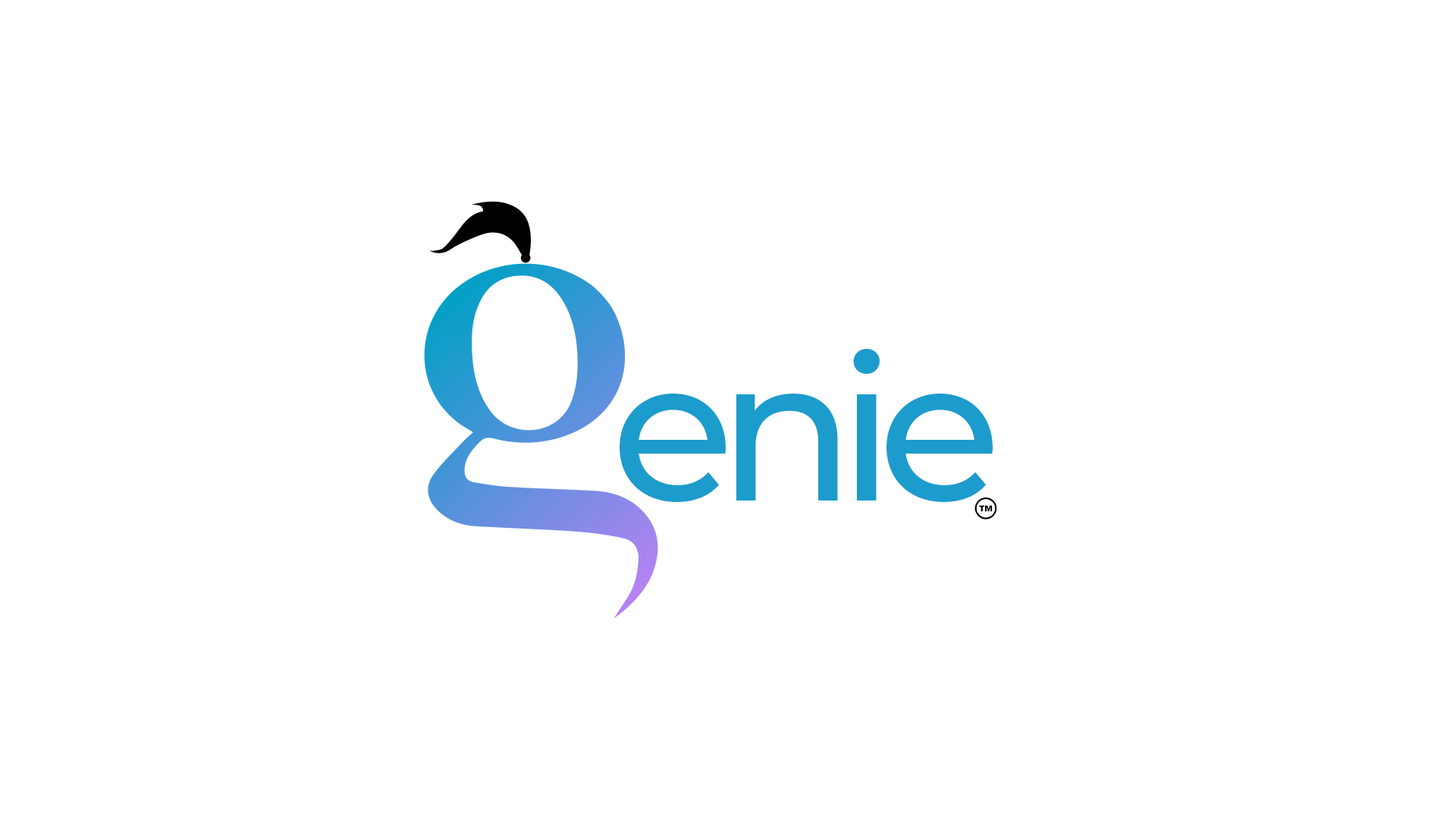
<style>
.page{position:relative;width:1456px;height:819px;background:#ffffff}
.page>*{position:absolute;margin:0}
.t1{font:200.8px "Montserrat-Medium";letter-spacing:-0.08em;color:#1b9ccc}
</style>
<div class="page">
<p class="t1" style="left:620px;top:349px;width:373px;height:153px">enie</p>
</div>
